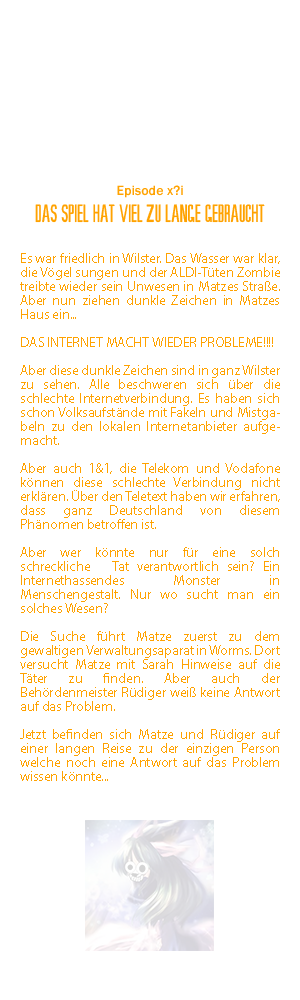
<style>
.page{position:relative;width:300px;height:1000px;background:#ffffff}
.page>*{position:absolute;margin:0}
.t1{font:14px "SW-Crawl-Body";color:#ffa200}
.t2{font:24px "SW-Crawl-Title";color:#ffa200}
.t3{font:14px/14px "MyriadPro-Regular";color:#ffa200}
</style>
<div class="page">
<p class="t1" style="left:117px;top:185px;width:66px;height:13px">Episode x?i</p>
<p class="t2" style="left:35px;top:204px;width:230px;height:19px">Das spiel hat viel zu lange gebraucht</p>
<p class="t3" style="left:20px;top:253px;width:260px;height:528px;text-align:justify">Es war friedlich in Wilster. Das Wasser war klar, die Vögel sungen und der ALDI-Tüten Zombie treibte wieder sein Unwesen in Matzes Straße. Aber nun ziehen dunkle Zeichen in Matzes Haus ein...<br><br>DAS INTERNET MACHT WIEDER PROBLEME!!!!<br><br>Aber diese dunkle Zeichen sind in ganz Wilster zu sehen. Alle beschweren sich über die schlechte Internetverbindung. Es haben sich schon Volksaufstände mit Fakeln und Mistgabeln zu den lokalen Internetanbieter aufgemacht.<br><br>Aber auch 1&amp;1, die Telekom und Vodafone können diese schlechte Verbindung nicht erklären. Über den Teletext haben wir erfahren, dass ganz Deutschland von diesem Phänomen betroffen ist.<br><br>Aber wer könnte nur für eine solch schreckliche   Tat verantwortlich sein? Ein Internethassendes Monster in Menschengestalt. Nur wo sucht man ein solches Wesen?<br><br>Die Suche führt Matze zuerst zu dem gewaltigen Verwaltungsaparat in Worms. Dort versucht Matze mit Sarah Hinweise auf die Täter zu finden. Aber auch der Behördenmeister Rüdiger weiß keine Antwort auf das Problem.<br><br>Jetzt befinden sich Matze und Rüdiger auf einer langen Reise zu der einzigen Person welche noch eine Antwort auf das Problem wissen könnte...</p>
</div>
